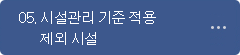
<style>
.page{position:relative;width:240px;height:55px;background:#3d588d}
.page>*{position:absolute;margin:0}
.t1{font:14.7px "Dotum";letter-spacing:-0.1em;color:#ffffff}
</style>
<div class="page">
<p class="t1" style="left:19px;top:11px;width:137px;height:13px">05. 시설관리 기준 적용</p>
<p class="t1" style="left:40px;top:32px;width:56px;height:13px">제외 시설</p>
</div>
